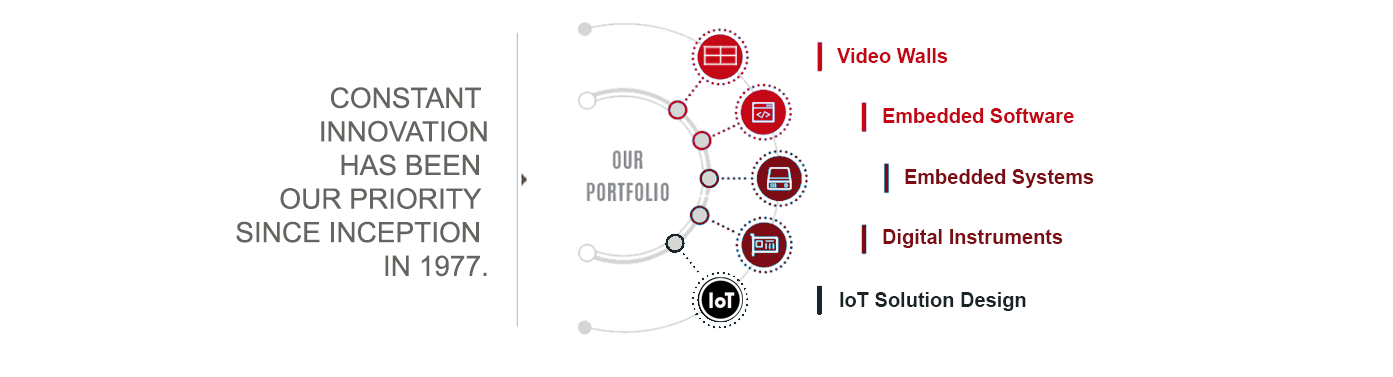
<style>
.page{position:relative;width:1393px;height:377px;background:#ffffff}
.page>*{position:absolute;margin:0}
.t1{font:20px "Arial-BoldMT";color:#c40614}
.t2{font:28px "ArialMT";color:#646560}
.t3{font:20px "Arial-BoldMT";color:#7c0d15}
.t4{font:20px "Arial-BoldMT";color:#1a2327}
</style>
<div class="page">
<p class="t1" style="left:837px;top:48px;width:111px;height:15px">Video Walls</p>
<p class="t2" style="left:236px;top:87px;width:251px;height:190px;text-align:right">CONSTANT <br>INNOVATION<br>HAS BEEN <br>OUR PRIORITY <br>SINCE INCEPTION <br>IN 1977.</p>
<p class="t1" style="left:883px;top:108px;width:191px;height:15px">Embedded Software</p>
<p class="t3" style="left:905px;top:169px;width:189px;height:19px">Embedded Systems</p>
<p class="t3" style="left:883px;top:229px;width:180px;height:19px">Digital Instruments</p>
<p class="t4" style="left:840px;top:292px;width:186px;height:19px">IoT Solution Design</p>
</div>
